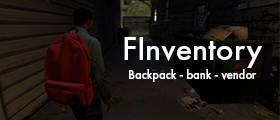
<style>
.page{position:relative;width:280px;height:120px}
.page>*{position:absolute;margin:0}
.t1{font:33.3px "FuturaPT-Medium";color:#ffffff}
.t2{font:12.5px "FuturaPT-Medium";color:#ffffff}
</style>
<div class="page">
<p class="t1" style="left:124px;top:37px;width:138px;height:31px">FInventory</p>
<p class="t2" style="left:129px;top:69px;width:128px;height:13px">Backpack - bank - vendor</p>
</div>
